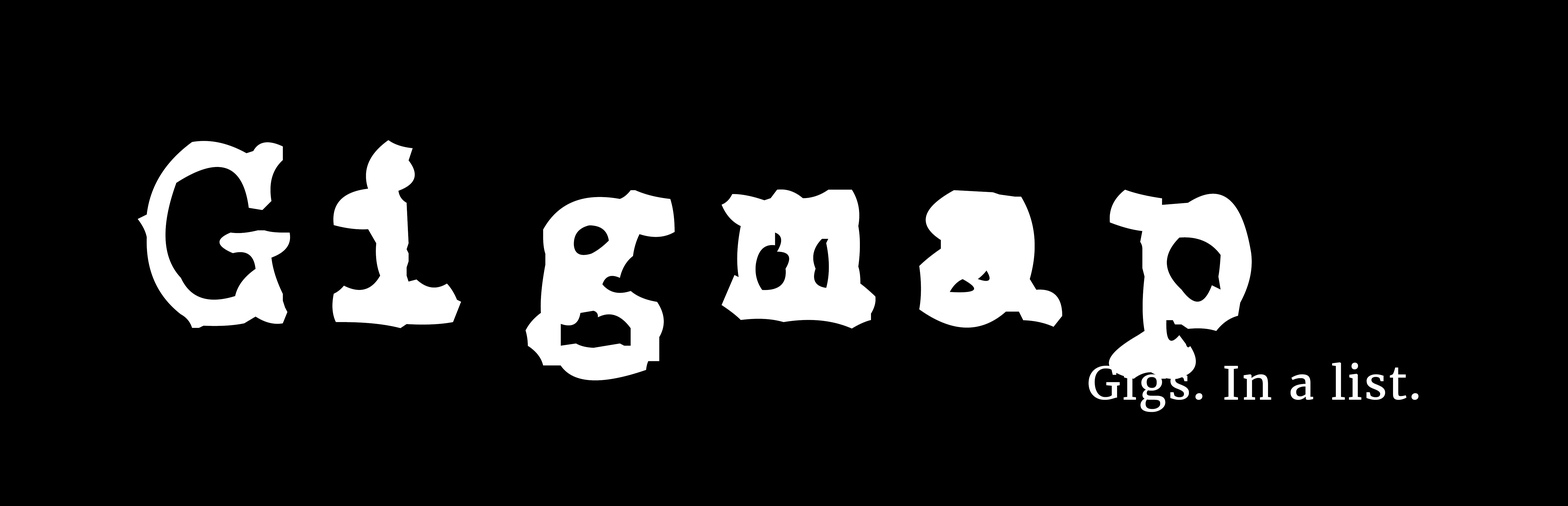
<style>
.page{position:relative;width:1568px;height:506px;background:#000000}
.page>*{position:absolute;margin:0}
.t1{font:252.9px "CarbonType";letter-spacing:0.03em;color:#ffffff}
.t2{font:45.5px "Merriweather-Regular";letter-spacing:0.03em;color:#ffffff}
</style>
<div class="page">
<p class="t1" style="left:138px;top:140px;width:1114px;height:240px">Gigmap</p>
<p class="t2" style="left:1088px;top:362px;width:331px;height:50px">Gigs. In a list.</p>
</div>
